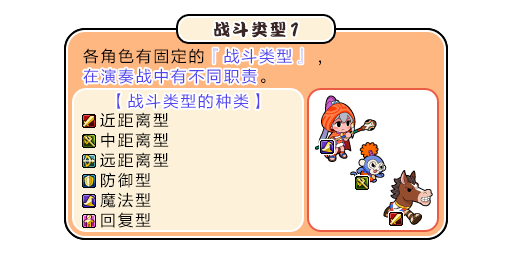
<style>
.page{position:relative;width:512px;height:256px;background:#ffffff}
.page>*{position:absolute;margin:0}
.t1{font:17px "DFPKanTingLiuW9";letter-spacing:0.1em;color:#3b2626}
.t2{font:20.7px "DFPKanTingLiuW9";letter-spacing:0.1em;color:#3b2626;scale:0.87 1}
.t3{font:16px/20px "FZLTHJW--GB1-0";letter-spacing:0.1em;color:#5444ed}
.t4{font:16px/20px "FZLTHJW--GB1-0";letter-spacing:0.1em;color:#000000}
.t5{font:16px "FZLTHJW--GB1-0";letter-spacing:0.1em;color:#5444ed}
.t6{font:16px "FZLTHJW--GB1-0";letter-spacing:0.1em;color:#000000}
</style>
<div class="page">
<p class="t1" style="left:214px;top:21px;width:84px;height:17px">战斗类型<span class="t2">1</span></p>
<p class="t3" style="left:83px;top:48px;width:238px;height:36px"><span class="t4">各角色有固定的</span>『战斗类型』 <span class="t4">,<br></span>在演奏战中有不同职责<span class="t4">。</span></p>
<p class="t5" style="left:213px;top:48px;width:90px;height:16px">『战斗类型』</p>
<p class="t5" style="left:83px;top:68px;width:174px;height:16px">在演奏战中有不同职责</p>
<p class="t5" style="left:117px;top:93px;width:143px;height:16px">【战斗类型的种类】</p>
<p class="t6" style="left:100px;top:112px;width:69px;height:16px">近距离型</p>
<p class="t6" style="left:101px;top:132px;width:68px;height:16px">中距离型</p>
<p class="t6" style="left:100px;top:152px;width:69px;height:16px">远距离型</p>
<p class="t6" style="left:101px;top:172px;width:50px;height:16px">防御型</p>
<p class="t6" style="left:100px;top:192px;width:51px;height:16px">魔法型</p>
<p class="t6" style="left:101px;top:212px;width:50px;height:16px">回复型</p>
</div>
